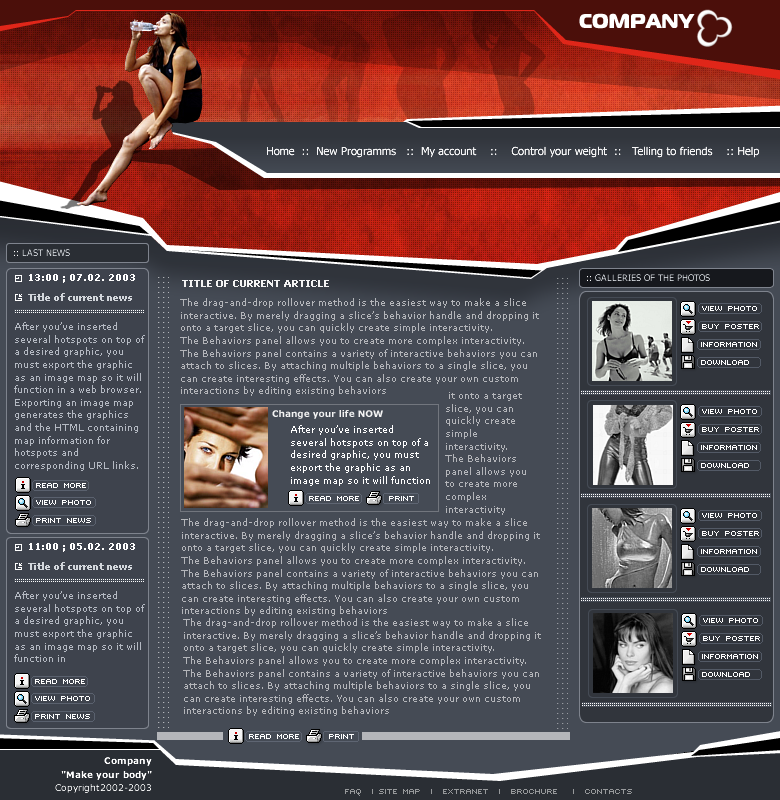
<style>
.page{position:relative;width:780px;height:800px;background:#454b55}
.page>*{position:absolute;margin:0}
.t1{font:11px "Tahoma";color:#ffffff}
.t2{font:9px "Tahoma"}
.t3{font:10px "Verdana-Bold";color:#ffffff}
.t4{font:9px "Tahoma-Bold";color:#f3f3f3}
.t5{font:9px "Tahoma";color:#ced2d7}
.t6{font:9px "Verdana-Bold";color:#d3d7dc}
.t7{font:9px/12.6px "Verdana";color:#b4b6ba}
.t8{font:8px "Sevenet 7 Cyr";letter-spacing:0.14em;color:#ffffff}
.t9{font:9px/12.6px "Verdana";color:#b4b9c2}
.t10{font:9px "Verdana-Bold";color:#f3f3f3}
.t11{font:9px/12.6px "Verdana";color:#ffffff}
.t12{font:9px/13.5px "Verdana-Bold";color:#ffffff}
.t13{font:9px/13.5px "Verdana";color:#ffffff}
.t14{font:8px "Sevenet 7 Cyr";letter-spacing:0.14em;color:#97999b}
</style>
<div class="page">
<p class="t1" style="left:267px;top:146px;width:492px;height:12px;opacity:0.8">Home  ::  New Programms   ::  My account    ::    Control your weight  ::   Telling to friends    :: Help</p>
<p class="t1" style="left:267px;top:146px;width:492px;height:12px;opacity:0.8">Home  ::  New Programms   ::  My account    ::    Control your weight  ::   Telling to friends    :: Help</p>
<p class="t2" style="left:14px;top:249px;width:56px;height:7px">:: LAST NEWS</p>
<p class="t3" style="left:29px;top:274px;width:106px;height:9px">13:00 ; 07.02. 2003</p>
<p class="t4" style="left:182px;top:280px;width:147px;height:7px">TITLE OF CURRENT ARTICLE</p>
<p class="t5" style="left:587px;top:274px;width:123px;height:7px">:: GALLERIES OF THE PHOTOS</p>
<p class="t6" style="left:28px;top:293px;width:104px;height:8px">Title of current news</p>
<p class="t7" style="left:180px;top:298px;width:359px;height:98px">The drag-and-drop rollover method is the easiest way to make a slice <br>interactive. By merely dragging a slice’s behavior handle and dropping it <br>onto a target slice, you can quickly create simple interactivity.<br>The Behaviors panel allows you to create more complex interactivity. <br>The Behaviors panel contains a variety of interactive behaviors you can <br>attach to slices. By attaching multiple behaviors to a single slice, you <br>can create interesting effects. You can also create your own custom <br>interactions by editing existing behaviors</p>
<p class="t8" style="left:702px;top:306px;width:55px;height:5px">view photo</p>
<p class="t9" style="left:14px;top:322px;width:131px;height:149px">After you’ve inserted <br>several hotspots on top of <br>a desired graphic, you <br>must export the graphic <br>as an image map so it will <br>function in a web browser. <br>Exporting an image map <br>generates the graphics <br>and the HTML containing <br>map information for <br>hotspots and <br>corresponding URL links.</p>
<p class="t8" style="left:702px;top:324px;width:57px;height:5px">buy poster</p>
<p class="t8" style="left:701px;top:342px;width:56px;height:5px">information</p>
<p class="t8" style="left:701px;top:360px;width:48px;height:5px">download</p>
<p class="t7" style="left:445px;top:392px;width:81px;height:123px">it onto a target <br>slice, you can <br>quickly create <br>simple <br>interactivity.<br>The Behaviors <br>panel allows you <br>to create more <br>complex <br>interactivity</p>
<p class="t10" style="left:272px;top:410px;width:111px;height:9px">Change your life NOW</p>
<p class="t8" style="left:702px;top:409px;width:55px;height:5px">view photo</p>
<p class="t11" style="left:291px;top:425px;width:139px;height:61px">After you’ve inserted <br>several hotspots on top of a <br>desired graphic, you must <br>export the graphic as an <br>image map so it will function</p>
<p class="t8" style="left:702px;top:427px;width:57px;height:5px">buy poster</p>
<p class="t8" style="left:701px;top:445px;width:56px;height:5px">information</p>
<p class="t8" style="left:701px;top:463px;width:48px;height:5px">download</p>
<p class="t8" style="left:36px;top:483px;width:50px;height:5px">read more</p>
<p class="t8" style="left:309px;top:496px;width:50px;height:5px">read more</p>
<p class="t8" style="left:389px;top:496px;width:25px;height:5px">print</p>
<p class="t8" style="left:36px;top:500px;width:55px;height:5px">view photo</p>
<p class="t8" style="left:36px;top:518px;width:55px;height:5px">print news</p>
<p class="t7" style="left:181px;top:518px;width:359px;height:98px">The drag-and-drop rollover method is the easiest way to make a slice <br>interactive. By merely dragging a slice’s behavior handle and dropping it <br>onto a target slice, you can quickly create simple interactivity.<br>The Behaviors panel allows you to create more complex interactivity. <br>The Behaviors panel contains a variety of interactive behaviors you can <br>attach to slices. By attaching multiple behaviors to a single slice, you <br>can create interesting effects. You can also create your own custom <br>interactions by editing existing behaviors</p>
<p class="t8" style="left:702px;top:513px;width:55px;height:5px">view photo</p>
<p class="t8" style="left:702px;top:531px;width:57px;height:5px">buy poster</p>
<p class="t3" style="left:29px;top:543px;width:106px;height:9px">11:00 ; 05.02. 2003</p>
<p class="t8" style="left:701px;top:549px;width:56px;height:5px">information</p>
<p class="t6" style="left:28px;top:562px;width:104px;height:8px">Title of current news</p>
<p class="t8" style="left:701px;top:567px;width:48px;height:5px">download</p>
<p class="t9" style="left:14px;top:591px;width:131px;height:71px">After you’ve inserted <br>several hotspots on top of <br>a desired graphic, you <br>must export the graphic <br>as an image map so it will <br>function in</p>
<p class="t7" style="left:183px;top:618px;width:358px;height:98px">The drag-and-drop rollover method is the easiest way to make a slice <br>interactive. By merely dragging a slice’s behavior handle and dropping it <br>onto a target slice, you can quickly create simple interactivity.<br>The Behaviors panel allows you to create more complex interactivity. <br>The Behaviors panel contains a variety of interactive behaviors you can <br>attach to slices. By attaching multiple behaviors to a single slice, you <br>can create interesting effects. You can also create your own custom <br>interactions by editing existing behaviors</p>
<p class="t8" style="left:703px;top:618px;width:55px;height:5px">view photo</p>
<p class="t8" style="left:703px;top:636px;width:57px;height:5px">buy poster</p>
<p class="t8" style="left:702px;top:654px;width:56px;height:5px">information</p>
<p class="t8" style="left:702px;top:672px;width:48px;height:5px">download</p>
<p class="t8" style="left:35px;top:679px;width:50px;height:5px">read more</p>
<p class="t8" style="left:35px;top:696px;width:55px;height:5px">view photo</p>
<p class="t8" style="left:35px;top:714px;width:55px;height:5px">print news</p>
<p class="t8" style="left:249px;top:734px;width:50px;height:5px">read more</p>
<p class="t8" style="left:329px;top:734px;width:25px;height:5px">print</p>
<p class="t12" style="left:55px;top:757px;width:97px;height:36px">Company<br>"Make your body"<span class="t13"><br>Copyright2002-2003</span></p>
<p class="t14" style="left:345px;top:789px;width:287px;height:7px">FAQ  | Site map  |  Extranet  |  Brochure   |  contacts</p>
</div>
